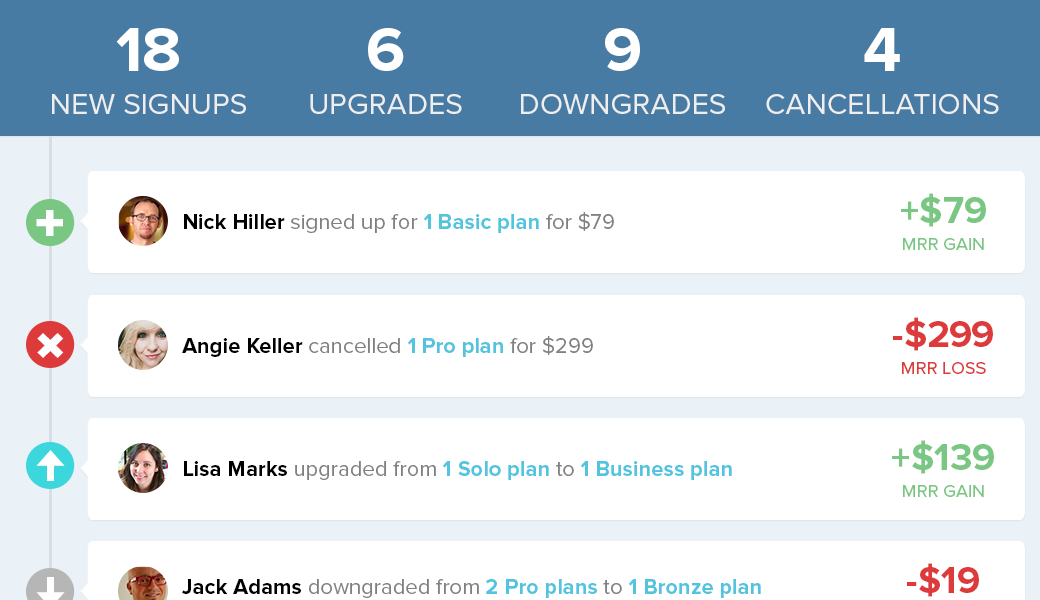
<style>
.page{position:relative;width:1040px;height:600px;background:#ffffff}
.page>*{position:absolute;margin:0}
.t1{font:30px/43px "ProximaNova-Regular";color:#eeeeee}
.t2{font:64px/73.8px "ProximaNova-Bold";color:#ffffff}
.t3{font:64px/43px "ProximaNova-Bold";color:#ffffff}
.t4{font:30px/34px "ProximaNova-Regular";color:#eeeeee}
.t5{font:18px/22.8px "ProximaNova-Regular";color:#79c782}
.t6{font:38px/19.8px "ProximaNova-Bold";color:#79c782}
.t7{font:38px/27px "ProximaNova-Bold";color:#79c782}
.t8{font:18px/27px "ProximaNova-Regular";color:#79c782}
.t9{font:37px "Pictos";color:#ffffff}
.t10{font:22px "ProximaNova-Regular";color:#808080}
.t11{font:22px "ProximaNova-Bold";color:#000000}
.t12{font:22px "ProximaNova-Bold";color:#53c4e0}
.t13{font:22px "ProximaNova-Regular";color:#ffffff}
.t14{font:14px "ProximaNova-Regular";color:#ffffff}
.t15{font:14px "Pictos";color:#ffffff}
.t16{font:38px/19.8px "ProximaNova-Bold";letter-spacing:-0.02em;color:#dd3b3b}
.t17{font:38px/19.8px "ProximaNova-Bold";color:#dd3b3b}
.t18{font:18px/27px "ProximaNova-Regular";color:#dd3b3b}
.t19{font:18px/22.8px "ProximaNova-Regular";color:#dd3b3b}
.t20{font:36px "Pictos";color:#ffffff}
.t21{font:22px "Pictos";color:#ffffff}
</style>
<div class="page">
<p class="t1" style="left:52px;top:28px;width:194px;height:86px;text-align:center"><span class="t2">1</span><span class="t3">8<br></span>NEW SI<span class="t4">GNUPS</span></p>
<p class="t1" style="left:310px;top:28px;width:152px;height:86px;text-align:center"><span class="t3">6<br></span>UPGRADES</p>
<p class="t1" style="left:521px;top:28px;width:204px;height:86px;text-align:center"><span class="t3">9<br></span>DOWNGRADES</p>
<p class="t1" style="left:766px;top:28px;width:233px;height:86px;text-align:center"><span class="t2">4<br></span>CANCELLATIONS</p>
<p class="t5" style="left:901px;top:193px;width:85px;height:57px;text-align:center"><span class="t6">+$</span><span class="t7">79<br></span><span class="t8">MRR </span>GAIN</p>
<p class="t9" style="left:36px;top:210px;width:27px;height:26px">&amp;</p>
<p class="t10" style="left:184px;top:212px;width:548px;height:21px"><span class="t11">Nick Hiller </span>signed up for <span class="t12">1 Basic plan</span> for $79  <span class="t13">V</span><span class="t14">iew in Stripe </span><span class="t15">R</span></p>
<p class="t16" style="left:893px;top:317px;width:100px;height:57px;text-align:center"><span class="t17">-</span>$299<br><span class="t18">MRR</span><span class="t19"> LOSS</span></p>
<p class="t20" style="left:37px;top:333px;width:27px;height:25px">*</p>
<p class="t14" style="left:182px;top:336px;width:529px;height:21px"><span class="t11">Angie Keller </span><span class="t10">cancelled </span><span class="t12">1 Pro plan</span><span class="t10"> for $299  </span><span class="t13">V</span>iew in Stripe <span class="t15">R</span></p>
<p class="t5" style="left:892px;top:440px;width:102px;height:57px;text-align:center"><span class="t6">+$1</span><span class="t7">39<br></span><span class="t8">MRR </span>GAIN</p>
<p class="t9" style="left:36px;top:450px;width:29px;height:31px">{</p>
<p class="t12" style="left:184px;top:461px;width:661px;height:19px"><span class="t11">Lisa Marks </span><span class="t10">upgraded from </span>1 Solo plan<span class="t10"> to </span>1 Business plan <span class="t13">V</span><span class="t14">iew in Stripe </span><span class="t15">R</span></p>
<p class="t10" style="left:182px;top:579px;width:750px;height:19px"><span class="t11">Jack Adams </span>downgraded from <span class="t12">2 Pro plans </span>to <span class="t12">1 Bronze plan  </span><span class="t13">View in Stripe </span><span class="t21">R</span></p>
</div>
